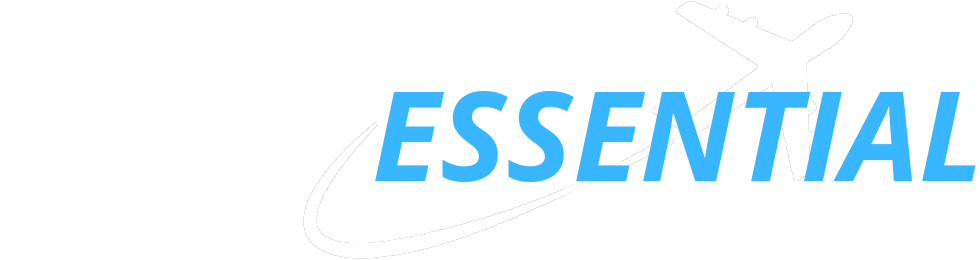
<style>
.page{position:relative;width:980px;height:260px;background:#ffffff}
.page>*{position:absolute;margin:0}
.t1{font:125px "OpenSansItalic-BoldItalic";color:#38b6ff}
.t2{font:125px "OpenSansItalic-BoldItalic";color:#ffffff}
</style>
<div class="page">
<p class="t1" style="left:4px;top:91px;width:972px;height:91px"><span class="t2">PILOT </span>ESSENTIAL</p>
</div>
